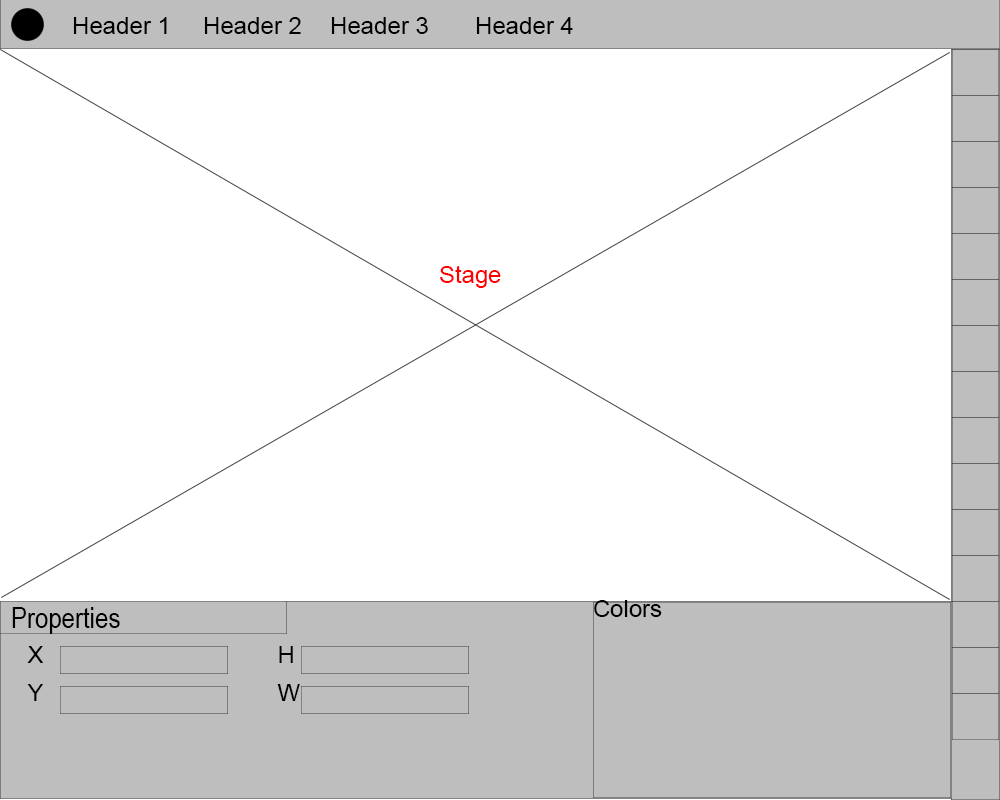
<style>
.page{position:relative;width:1000px;height:800px;background:#ffffff}
.page>*{position:absolute;margin:0}
.t1{font:24px "ArialMT";color:#000000}
.t2{font:24px "ArialMT";color:#fe0000}
.t3{font:29.2px "ArialMT";color:#000000;scale:0.82 1}
</style>
<div class="page">
<p class="t1" style="left:73px;top:17px;width:94px;height:17px">Header 1</p>
<p class="t1" style="left:204px;top:17px;width:97px;height:17px">Header 2</p>
<p class="t1" style="left:331px;top:17px;width:97px;height:17px">Header 3</p>
<p class="t1" style="left:476px;top:17px;width:97px;height:17px">Header 4</p>
<p class="t2" style="left:440px;top:265px;width:61px;height:23px">Stage</p>
<p class="t1" style="left:594px;top:600px;width:68px;height:17px">Colors</p>
<p class="t3" style="left:12px;top:607px;width:108px;height:27px">Properties</p>
<p class="t1" style="left:27px;top:646px;width:17px;height:17px">X</p>
<p class="t1" style="left:279px;top:646px;width:14px;height:17px">H</p>
<p class="t1" style="left:27px;top:684px;width:16px;height:17px">Y</p>
<p class="t1" style="left:277px;top:684px;width:23px;height:17px">W</p>
</div>
